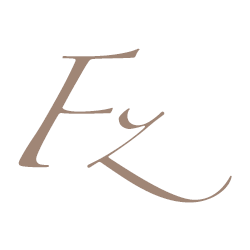
<style>
.page{position:relative;width:250px;height:250px;background:#ffffff}
.page>*{position:absolute;margin:0}
.t1{font:100px "Zapfino";color:#a08676}
</style>
<div class="page">
<p class="t1" style="left:18px;top:48px;width:214px;height:155px">Fz</p>
</div>
